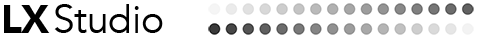
<style>
.page{position:relative;width:480px;height:38px;background:#ffffff}
.page>*{position:absolute;margin:0}
.t1{font:39.5px "Avenir-Book";letter-spacing:-0.01em;color:#000000}
.t2{font:39.5px "Avenir-Black";letter-spacing:-0.01em;color:#000000}
</style>
<div class="page">
<p class="t1" style="left:4px;top:4px;width:159px;height:29px"><span class="t2">LX</span>Studio</p>
</div>
